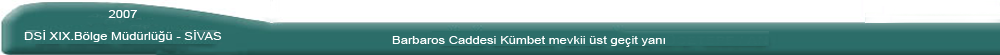
<style>
.page{position:relative;width:1000px;height:55px;background:#ffffff}
.page>*{position:absolute;margin:0}
.t1{font:10.8px/22.6px "ArialMT";color:#ffffff;scale:1.21 1}
.t2{font:10.8px "ArialMT";color:#ffffff;scale:1.21 1}
</style>
<div class="page">
<p class="t1" style="left:24px;top:10px;width:198px;height:32px;text-align:center">2007<br>DSİ XIX.Bölge Müdürlüğü - SİVAS</p>
<p class="t2" style="left:392px;top:36px;width:273px;height:11px">Barbaros Caddesi Kümbet mevkii üst geçit yanı</p>
</div>
